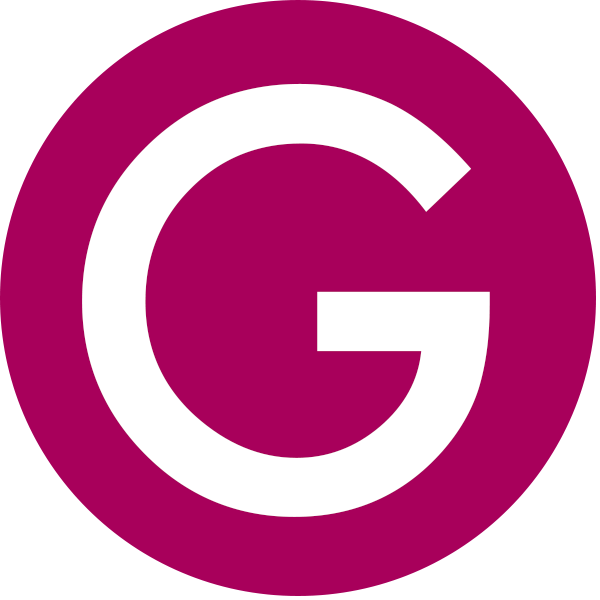
<style>
.page{position:relative;width:600px;height:600px;background:#a8005b}
.page>*{position:absolute;margin:0}
.t1{font:553.2px "Futura-Medium";color:#ffffff}
</style>
<div class="page">
<p class="t1" style="left:82px;top:83px;width:408px;height:434px">G</p>
</div>
